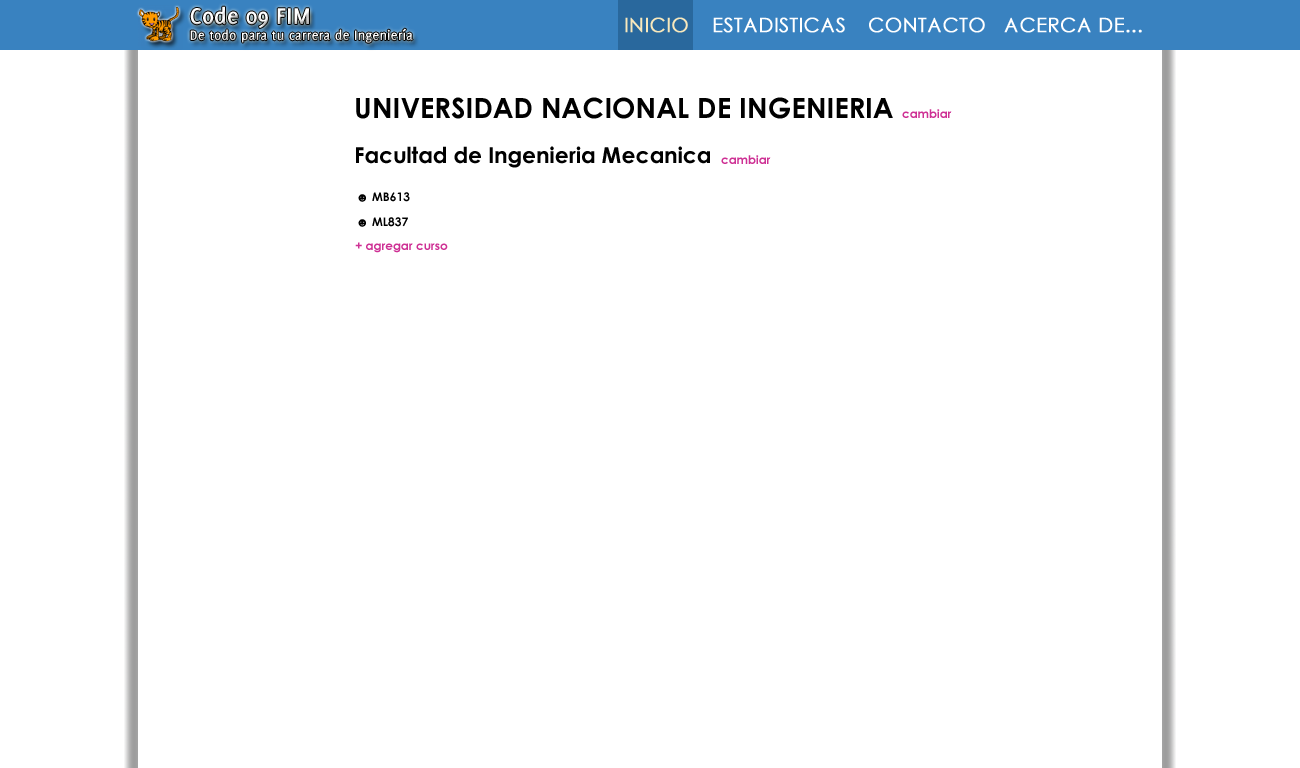
<style>
.page{position:relative;width:1300px;height:768px;background:#ffffff}
.page>*{position:absolute;margin:0}
.t1{font:25px "Delicious-Bold";color:#ffffff}
.t2{font:20px "CenturyGothic";color:#f8e8bc;font-weight:bold}
.t3{font:20px "CenturyGothic";color:#ffffff;font-weight:bold}
.t4{font:15px "Delicious-Bold";color:#ffffff}
.t5{font:28px "CenturyGothic-Bold";color:#000000}
.t6{font:12px "CenturyGothic-Bold";color:#ce3094}
.t7{font:22px "CenturyGothic-Bold";color:#000000}
.t8{font:12px "CenturyGothic-Bold";color:#000000}
</style>
<div class="page">
<p class="t1" style="left:190px;top:6px;width:119px;height:23px">Code 09 FIM</p>
<p class="t2" style="left:625px;top:17px;width:63px;height:16px">INICIO</p>
<p class="t3" style="left:713px;top:17px;width:132px;height:16px">ESTADISTICAS</p>
<p class="t3" style="left:869px;top:17px;width:116px;height:16px">CONTACTO</p>
<p class="t3" style="left:1004px;top:17px;width:138px;height:16px">ACERCA DE...</p>
<p class="t4" style="left:190px;top:28px;width:223px;height:15px">De todo para tu carrera de Ingeniería</p>
<p class="t5" style="left:356px;top:97px;width:537px;height:22px">UNIVERSIDAD NACIONAL DE INGENIERIA</p>
<p class="t6" style="left:902px;top:109px;width:50px;height:9px">cambiar</p>
<p class="t7" style="left:356px;top:146px;width:354px;height:22px">Facultad de Ingenieria Mecanica</p>
<p class="t6" style="left:721px;top:155px;width:50px;height:9px">cambiar</p>
<p class="t8" style="left:358px;top:192px;width:52px;height:10px">☻ MB613</p>
<p class="t8" style="left:358px;top:217px;width:50px;height:10px">☻ ML837</p>
<p class="t6" style="left:355px;top:242px;width:93px;height:11px">+ agregar curso</p>
</div>
